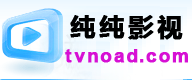
<style>
.page{position:relative;width:192px;height:80px}
.page>*{position:absolute;margin:0}
.t1{font:24.5px "MicrosoftYaHei-Bold";letter-spacing:0.16em;color:#000000;font-weight:bold}
.t2{font:18.4px "Arial-BoldMT";letter-spacing:0.16em;color:#d610d4;font-weight:bold}
</style>
<div class="page">
<p class="t1" style="left:70px;top:15px;width:113px;height:25px">纯纯影视</p>
<p class="t2" style="left:65px;top:49px;width:123px;height:14px">tvnoad.com</p>
</div>
